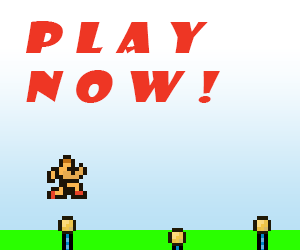
<style>
.page{position:relative;width:300px;height:250px}
.page>*{position:absolute;margin:0}
.t1{font:41.5px/49px "ShowcardGothic-Reg";letter-spacing:0.26em;color:#ee3624;font-style:italic;scale:1.3 1}
</style>
<div class="page">
<p class="t1" style="left:26px;top:21px;width:194px;height:82px">Play <br>Now!</p>
</div>
